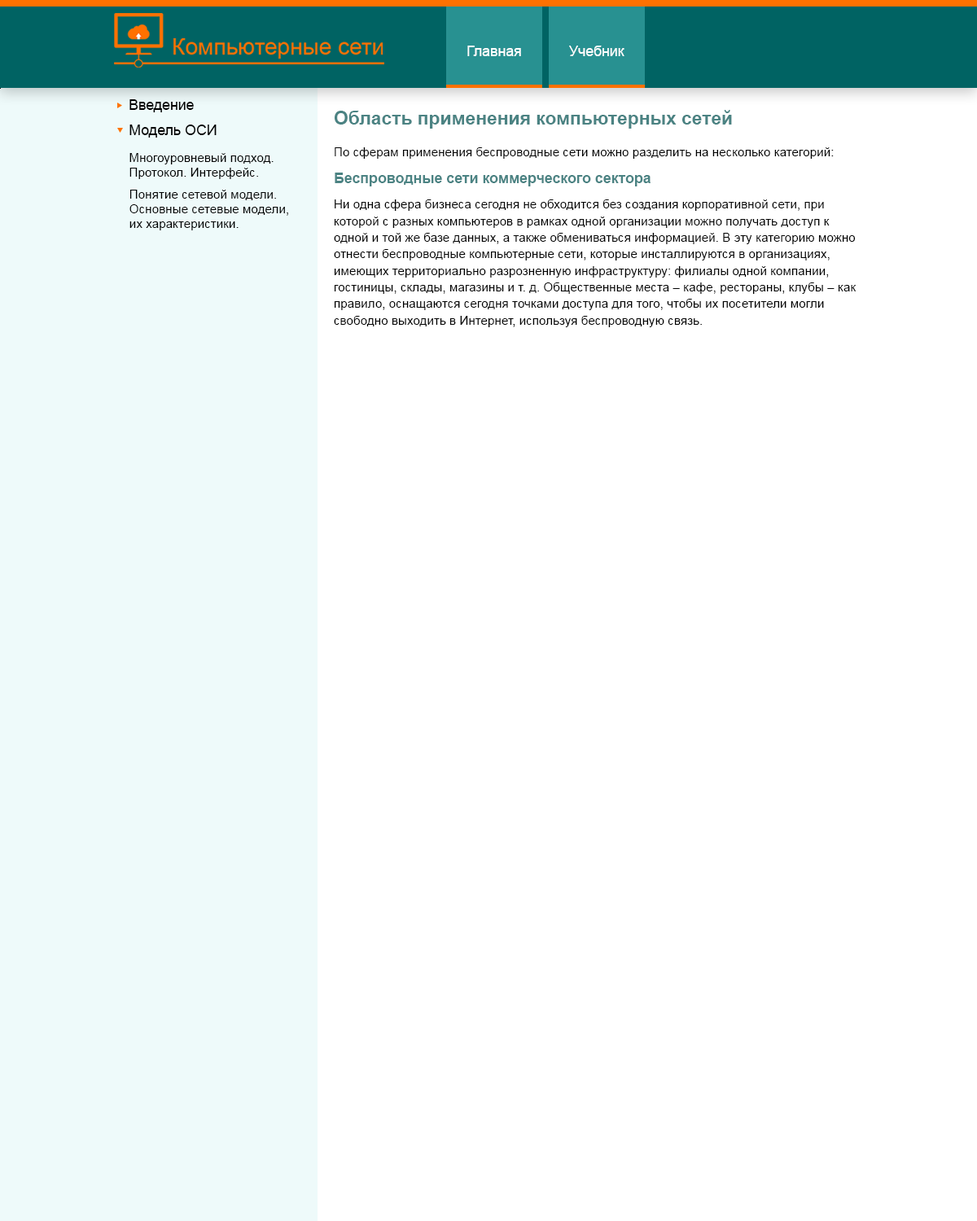
<style>
.page{position:relative;width:977px;height:1221px;background:#ffffff}
.page>*{position:absolute;margin:0}
.t1{font:14.5px "ArialMT";color:#ffffff}
.t2{font:14.4px "ArialMT";color:#000000}
.t3{font:18.6px "Arial-BoldMT";color:#4b8383}
.t4{font:14.5px "ArialMT";color:#000000}
.t5{font:12.4px "ArialMT";color:#000000}
.t6{font:14.5px "Arial-BoldMT";color:#4b8383}
.t7{font:12.4px/16.5px "ArialMT";color:#000000}
</style>
<div class="page">
<p class="t1" style="left:467px;top:46px;width:54px;height:10px">Главная</p>
<p class="t1" style="left:569px;top:46px;width:55px;height:10px">Учебник</p>
<p class="t2" style="left:129px;top:99px;width:65px;height:13px">Введение</p>
<p class="t3" style="left:335px;top:110px;width:397px;height:19px">Область применения компьютерных сетей</p>
<p class="t4" style="left:129px;top:125px;width:88px;height:13px">Модель ОСИ</p>
<p class="t5" style="left:335px;top:147px;width:498px;height:12px">По сферам применения беспроводные сети можно разделить на несколько категорий:</p>
<p class="t5" style="left:129px;top:153px;width:144px;height:26px">Многоуровневый подход. Протокол. Интерфейс.</p>
<p class="t6" style="left:335px;top:173px;width:315px;height:13px">Беспроводные сети коммерческого сектора</p>
<p class="t5" style="left:129px;top:190px;width:159px;height:40px">Понятие сетевой модели. Основные сетевые модели, их характеристики.</p>
<p class="t7" style="left:334px;top:199px;width:521px;height:128px">Ни одна сфера бизнеса сегодня не обходится без создания корпоративной сети, при которой с разных компьютеров в рамках одной организации можно получать доступ к одной и той же базе данных, а также обмениваться информацией. В эту категорию можно отнести беспроводные компьютерные сети, которые инсталлируются в организациях, имеющих территориально разрозненную инфраструктуру: филиалы одной компании, гостиницы, склады, магазины и т. д. Общественные места – кафе, рестораны, клубы – как правило, оснащаются сегодня точками доступа для того, чтобы их посетители могли свободно выходить в Интернет, используя беспроводную связь.</p>
</div>
